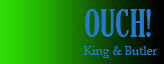
<style>
.page{position:relative;width:164px;height:64px}
.page>*{position:absolute;margin:0}
.t1{font:36px "GloucesterMT-ExtraCondensed";color:#237bcd}
.t2{font:12px "Palatino-Roman";color:#237bcd}
</style>
<div class="page">
<p class="t1" style="left:85px;top:9px;width:66px;height:28px">OUCH!</p>
<p class="t2" style="left:83px;top:46px;width:75px;height:12px">King &amp; Butler</p>
</div>
